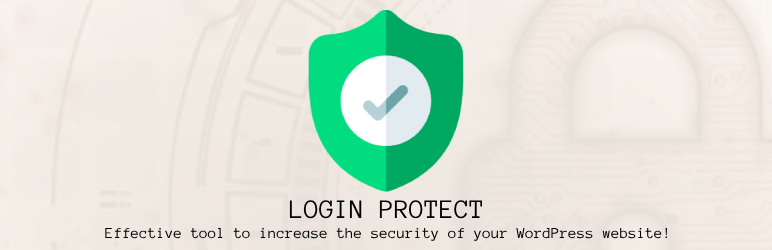
<style>
.page{position:relative;width:772px;height:250px}
.page>*{position:absolute;margin:0}
.t1{font:22.5px "Anonymous";color:#000000}
.t2{font:12.9px "Anonymous";color:#000000}
</style>
<div class="page">
<p class="t1" style="left:289px;top:200px;width:193px;height:19px">LOGIN PROTECT</p>
<p class="t2" style="left:105px;top:228px;width:562px;height:13px">Effective tool to increase the security of your WordPress website!</p>
</div>
